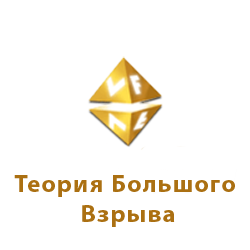
<style>
.page{position:relative;width:250px;height:250px;background:#ffffff}
.page>*{position:absolute;margin:0}
.t1{font:25px "MyriadPro-Bold";letter-spacing:0.05em;color:#ab7012}
</style>
<div class="page">
<p class="t1" style="left:14px;top:175px;width:221px;height:52px;text-align:center">Теория Большого<br> Взрыва</p>
</div>
